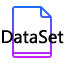
<style>
.page{position:relative;width:64px;height:64px;background:#ffffff}
.page>*{position:absolute;margin:0}
.t1{font:16.8px "MicrosoftYaHei";color:#000000}
</style>
<div class="page">
<p class="t1" style="left:2px;top:30px;width:62px;height:14px">DataSet</p>
</div>
